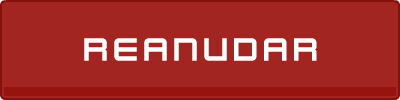
<style>
.page{position:relative;width:400px;height:100px;background:#a32521}
.page>*{position:absolute;margin:0}
.t1{font:36px "KenVector-Future";color:#ffffff}
</style>
<div class="page">
<p class="t1" style="left:84px;top:38px;width:233px;height:23px">Reanudar</p>
</div>
